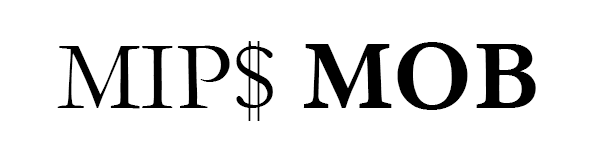
<style>
.page{position:relative;width:600px;height:160px;background:#ffffff}
.page>*{position:absolute;margin:0}
.t1{font:100px "Garamond";color:#000000}
.t2{font:100px "Garamond-Bold";color:#000000}
</style>
<div class="page">
<p class="t1" style="left:57px;top:41px;width:479px;height:80px">MIP$ <span class="t2">MOB</span></p>
</div>
